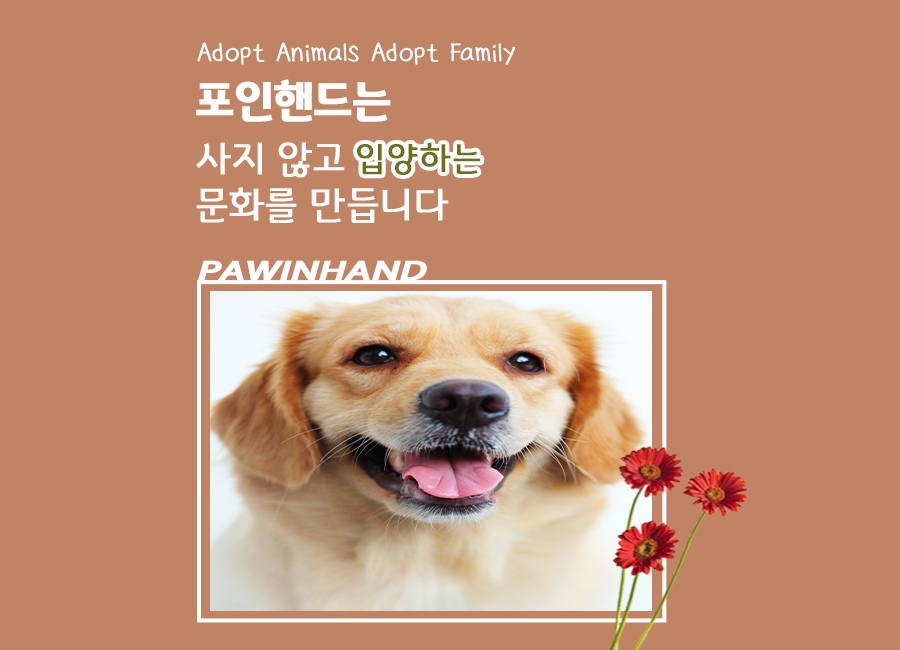
<style>
.page{position:relative;width:900px;height:650px;background:#c08464}
.page>*{position:absolute;margin:0}
.t1{font:28px "ACCchildrenheartOTF";letter-spacing:-0.03em;color:#fefefe;font-weight:bold}
.t2{font:40px/46px "GyeonggiTitleL";letter-spacing:-0.01em;color:#fefefe;font-weight:bold}
.t3{font:45px/46px "GyeonggiTitleB";letter-spacing:-0.01em;color:#fefefe;font-weight:bold}
.t4{font:35px "GyeonggiTitleL";letter-spacing:0.03em;color:#68721a;font-weight:bold}
.t5{font:29.5px "Corbel-BoldItalic";letter-spacing:-0.03em;color:#fefefe;font-weight:bold;scale:1.38 1}
</style>
<div class="page">
<p class="t1" style="left:197px;top:42px;width:319px;height:23px">Adopt Animals Adopt Family</p>
<p class="t2" style="left:196px;top:79px;width:253px;height:144px"><span class="t3">포인핸드는<br></span>사지 않고<br>문화를 만듭니다</p>
<p class="t4" style="left:357px;top:142px;width:124px;height:33px">입양하는</p>
<p class="t5" style="left:198px;top:260px;width:229px;height:21px">PAWINHAND</p>
</div>
